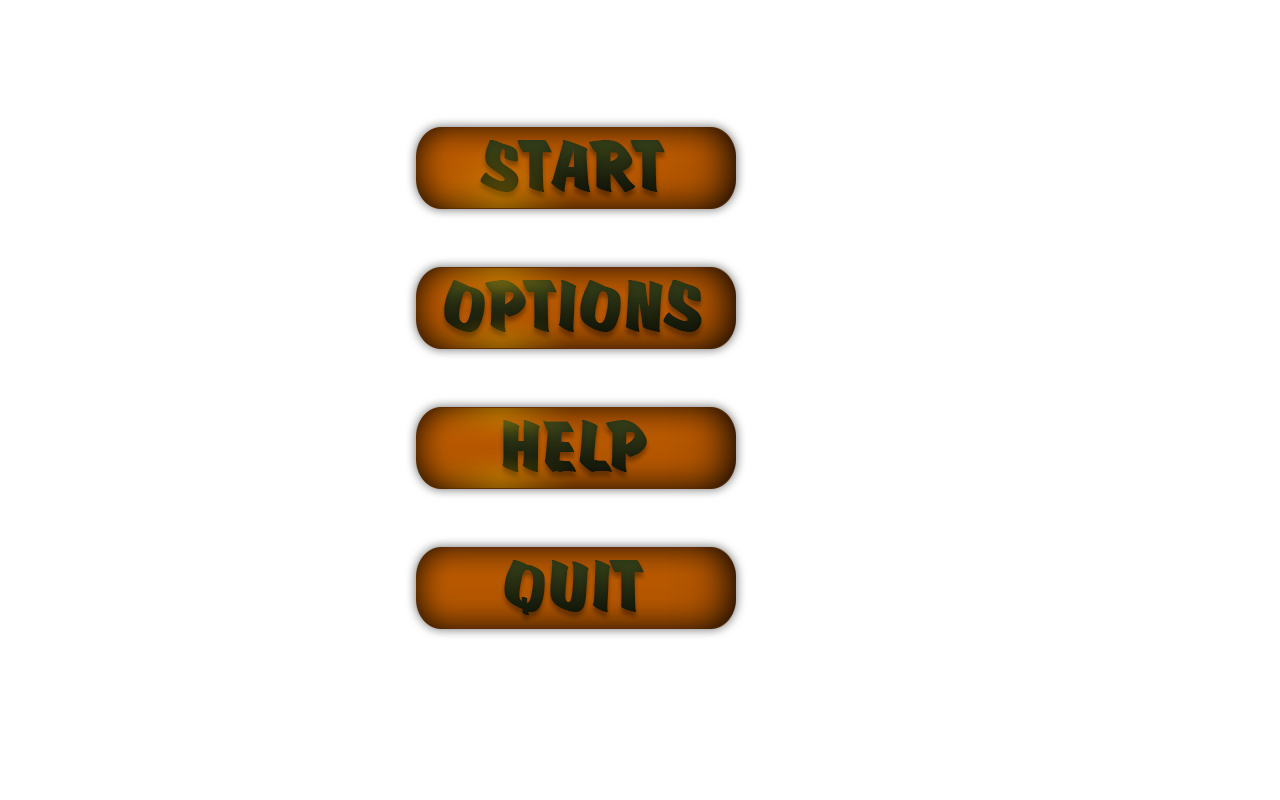
<style>
.page{position:relative;width:1280px;height:800px;background:#ffffff}
.page>*{position:absolute;margin:0}
.t1{font:75px "Scratch";color:#343e18}
.t2{font:75px "Scratch";color:#252b10}
</style>
<div class="page">
<p class="t1" style="left:480px;top:140px;width:185px;height:52px">START</p>
<p class="t2" style="left:444px;top:280px;width:258px;height:52px">OPTIONS</p>
<p class="t1" style="left:502px;top:420px;width:145px;height:52px">HELP</p>
<p class="t1" style="left:504px;top:560px;width:140px;height:55px">QUIT</p>
</div>
